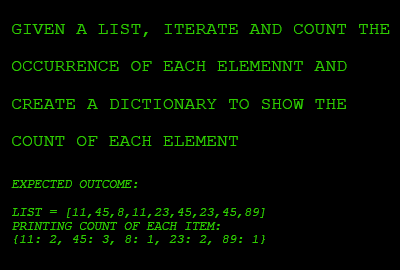
<style>
.page{position:relative;width:400px;height:270px;background:#000000}
.page>*{position:absolute;margin:0}
.t1{font:18.1px/37.5px "CourierNewPSMT";color:#30cc00;text-transform:uppercase}
.t2{font:12.5px/13.9px "CourierNewPSMT";color:#30cc00;text-transform:uppercase;font-style:italic}
</style>
<div class="page">
<p class="t1" style="left:11px;top:24px;width:379px;height:221px">given a list, iterate and count the<br>occurrence of each elemennt and<br>create a dictionary to show the <br>count of each element<br><span class="t2"><br><br>expected outcome:<br><br>list = [11,45,8,11,23,45,23,45,89]<br>printing count of each item:<br>{11: 2, 45: 3, 8: 1, 23: 2, 89: 1}</span></p>
</div>
